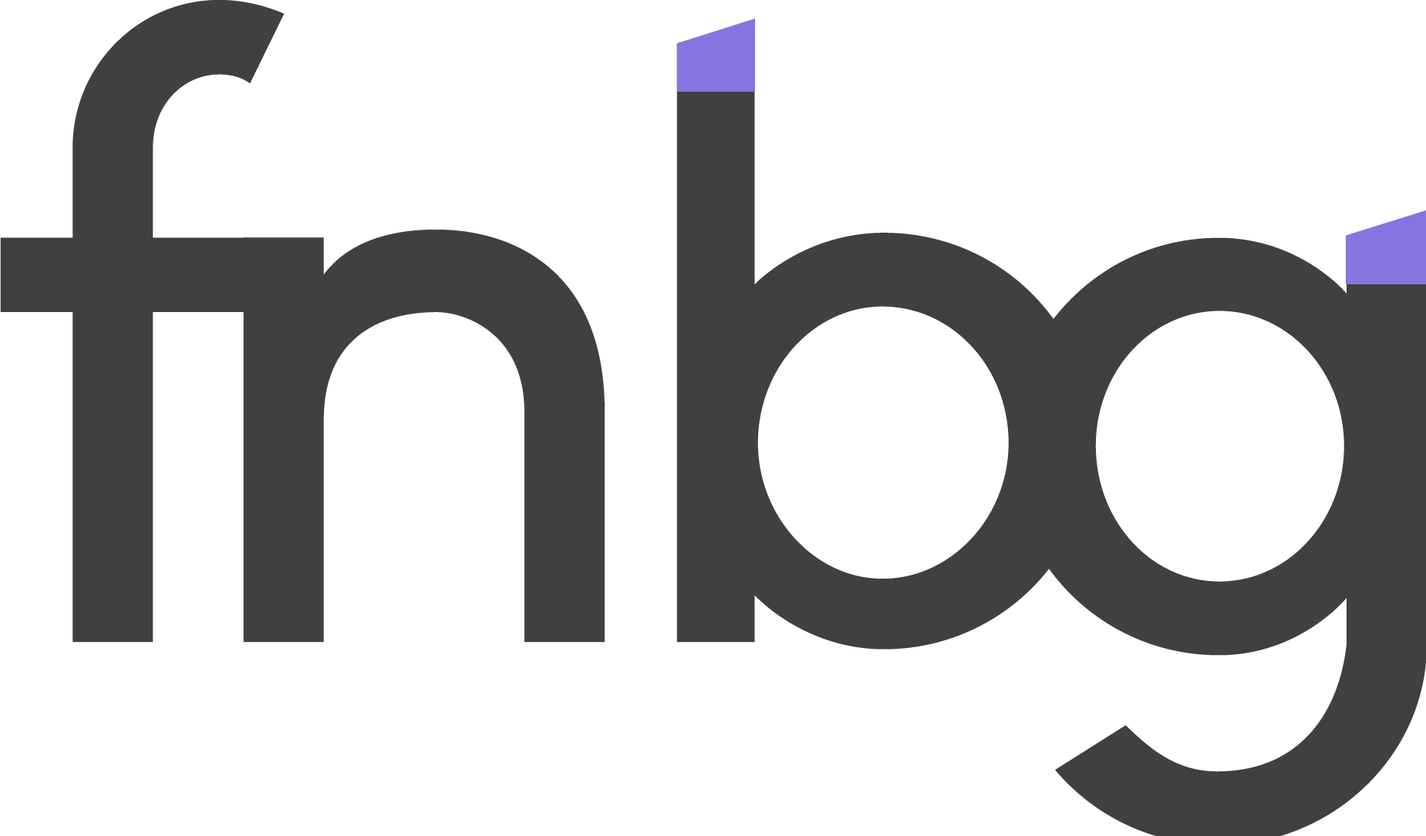
<style>
.page{position:relative;width:1426px;height:836px;background:#ffffff}
.page>*{position:absolute;margin:0}
.t1{font:808.8px "Simpel-Medium";color:#404040}
.t2{font:808.8px "Simpel-Medium";letter-spacing:-0.05em;color:#404040}
</style>
<div class="page">
<p class="t1" style="left:0px;top:0px;width:284px;height:643px">f</p>
<p class="t2" style="left:676px;top:19px;width:416px;height:631px">b</p>
<p class="t2" style="left:243px;top:230px;width:361px;height:413px">n</p>
</div>
